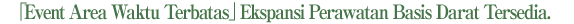
<style>
.page{position:relative;width:574px;height:24px;background:#ffffff}
.page>*{position:absolute;margin:0}
.t1{font:20px "RyuminPro-ExBold";letter-spacing:-0.08em;color:#46754a;scale:0.9 1}
</style>
<div class="page">
<p class="t1" style="left:20px;top:2px;width:531px;height:21px">「Event Area Waktu Terbatas」Ekspansi Perawatan Basis Darat Tersedia.</p>
</div>
